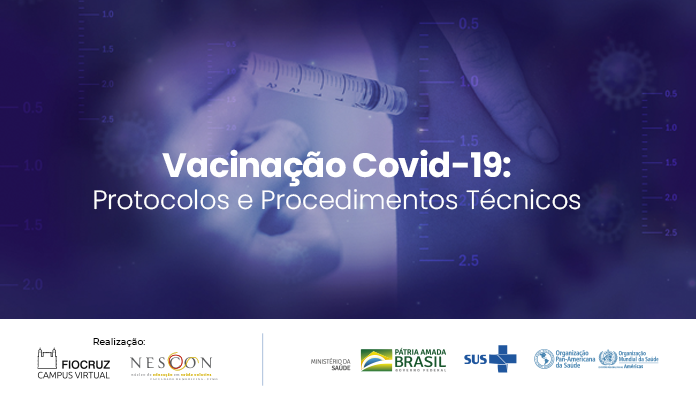
<style>
.page{position:relative;width:696px;height:400px}
.page>*{position:absolute;margin:0}
.t1{font:26.4px "Poppins-Light";color:#ffffff}
.t2{font:34px/41.7px "Poppins-Bold";letter-spacing:-0.02em;color:#ffffff}
.t3{font:9.3px "Montserrat-Medium";letter-spacing:0.005em;color:#000000}
</style>
<div class="page">
<p class="t1" style="left:94px;top:149px;width:487px;height:61px;text-align:center"><span class="t2">Vacinação Covid‑19:<br></span>Protocolos e Procedimentos Técnicos</p>
<p class="t3" style="left:93px;top:338px;width:52px;height:9px">Realização:</p>
</div>
